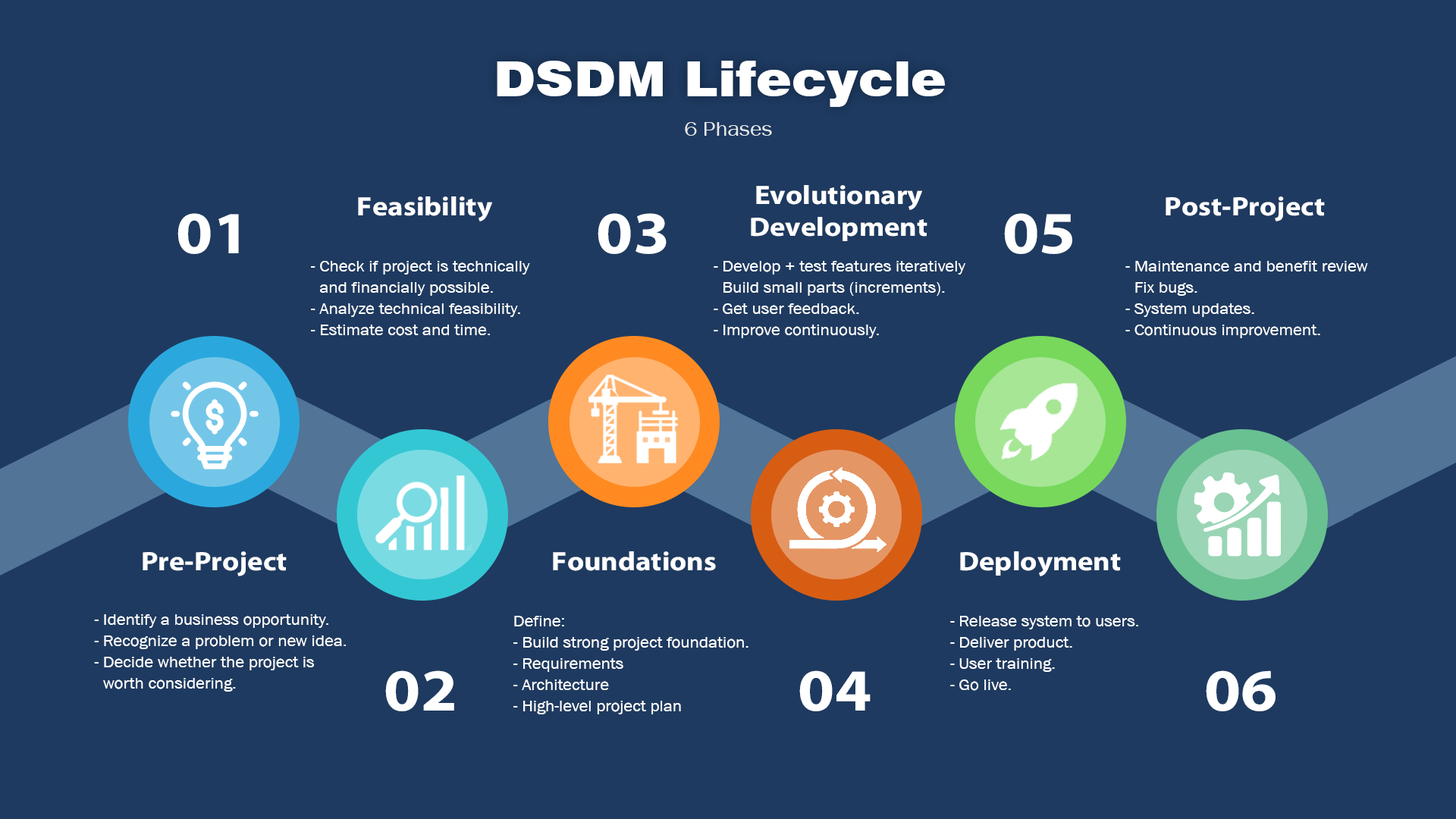
<style>
.page{position:relative;width:1456px;height:819px;background:#1e3a60}
.page>*{position:absolute;margin:0}
.t1{font:48.5px "Swiss721BT-Black";color:#ffffff;scale:1.1 1}
.t2{font:20.5px "AA-Khmer-AngDaunPov";color:#ffffff;scale:1.1 1}
.t3{font:26.7px "iKampuchea001_O'Chrov";color:#ffffff;scale:1.1 1}
.t4{font:60.2px "iKampuchea001_O'Chrov";color:#ffffff;scale:1.1 1}
.t5{font:15.6px/21.2px "AA-Khmer-AngDaunPov";color:#ffffff;scale:1.1 1}
.t6{font:26.8px "iKampuchea001_O'Chrov";color:#ffffff;scale:1.09 1}
.t7{font:15.7px/21.2px "AA-Khmer-AngDaunPov";color:#ffffff;scale:1.1 1}
.t8{font:59.9px "iKampuchea001_O'Chrov";color:#ffffff;scale:1.1 1}
</style>
<div class="page">
<p class="t1" style="left:497px;top:61px;width:448px;height:46px">DSDM Lifecycle</p>
<p class="t2" style="left:685px;top:122px;width:87px;height:14px;opacity:0.86">6 Phases</p>
<p class="t3" style="left:751px;top:185px;width:176px;height:56px;text-align:center">Evolutionary<br>Development</p>
<p class="t3" style="left:358px;top:196px;width:134px;height:25px">Feasibility</p>
<p class="t3" style="left:1166px;top:196px;width:159px;height:25px">Post-Project</p>
<p class="t4" style="left:177px;top:213px;width:62px;height:41px">01</p>
<p class="t4" style="left:598px;top:213px;width:69px;height:41px">03</p>
<p class="t4" style="left:1004px;top:213px;width:68px;height:41px">05</p>
<p class="t5" style="left:311px;top:261px;width:219px;height:75px">- Check if project is technically <br>  and financially possible.<br>- Analyze technical feasibility.<br>- Estimate cost and time.</p>
<p class="t5" style="left:714px;top:261px;width:251px;height:77px">- Develop + test features iteratively<br>  Build small parts (increments).<br>- Get user feedback.<br>- Improve continuously.</p>
<p class="t5" style="left:1125px;top:261px;width:243px;height:77px">- Maintenance and benefit review<br>  Fix bugs.<br>- System updates.<br>- Continuous improvement.</p>
<p class="t6" style="left:143px;top:551px;width:144px;height:25px">Pre-Project</p>
<p class="t6" style="left:553px;top:551px;width:163px;height:20px">Foundations</p>
<p class="t6" style="left:960px;top:551px;width:161px;height:25px">Deployment</p>
<p class="t7" style="left:94px;top:614px;width:252px;height:78px">- Identify a business opportunity.<br>- Recognize a problem or new idea.<br>- Decide whether the project is <br>  worth considering.</p>
<p class="t7" style="left:513px;top:616px;width:235px;height:98px">Define:<br>- Build strong project foundation.<br>- Requirements<br>- Architecture<br>- High-level project plan</p>
<p class="t7" style="left:950px;top:616px;width:188px;height:75px">- Release system to users.<br>- Deliver product.<br>- User training.<br>- Go live.</p>
<p class="t8" style="left:385px;top:670px;width:69px;height:41px">02</p>
<p class="t8" style="left:799px;top:670px;width:72px;height:41px">04</p>
<p class="t8" style="left:1206px;top:670px;width:69px;height:41px">06</p>
</div>
